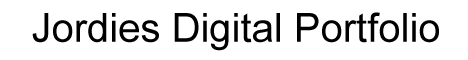
<style>
.page{position:relative;width:468px;height:60px;background:#ffffff}
.page>*{position:absolute;margin:0}
.t1{font:40px "ArialMT";color:#000000}
</style>
<div class="page">
<p class="t1" style="left:32px;top:12px;width:407px;height:39px">Jordies Digital Portfolio</p>
</div>
